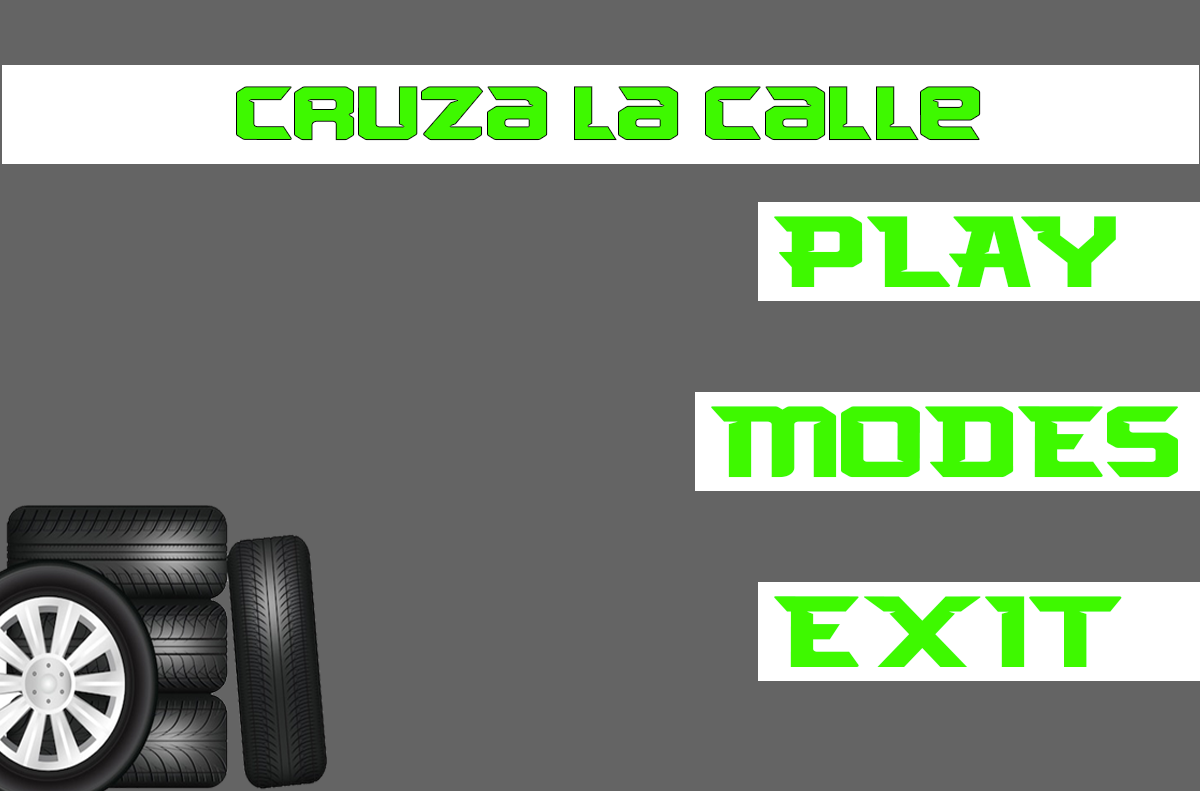
<style>
.page{position:relative;width:1200px;height:791px;background:#646464}
.page>*{position:absolute;margin:0}
.t1{font:84.5px "Arcades-Regular";color:#3ef900;scale:1.34 1}
.t2{font:94.2px "Arcades-Regular";color:#3ef900;scale:1.46 1}
</style>
<div class="page">
<p class="t1" style="left:236px;top:86px;width:745px;height:55px">cruza la calle</p>
<p class="t2" style="left:774px;top:216px;width:342px;height:71px">PLAY</p>
<p class="t2" style="left:711px;top:406px;width:468px;height:72px">MODES</p>
<p class="t2" style="left:774px;top:596px;width:348px;height:71px">EXIT</p>
</div>
